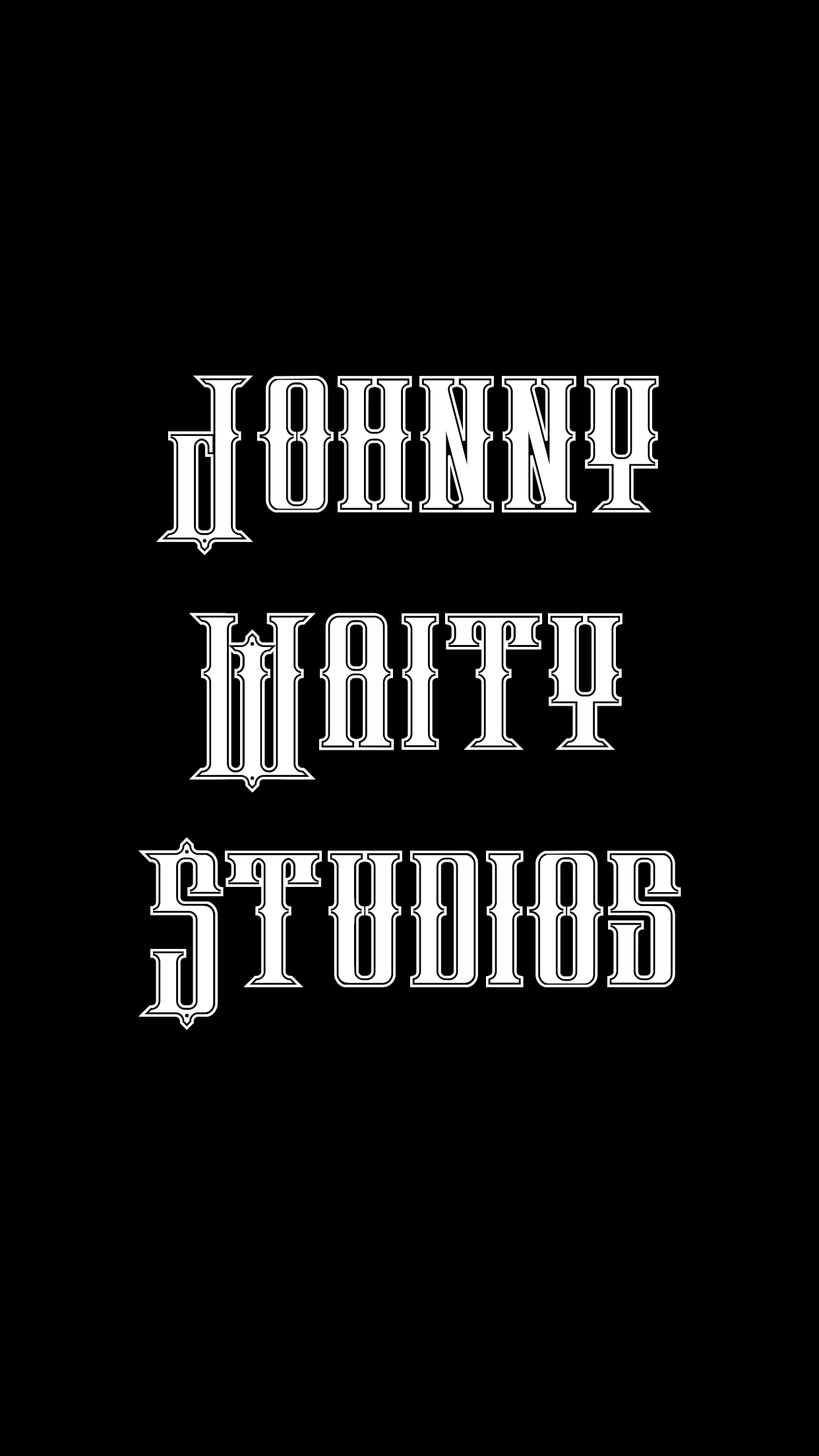
<style>
.page{position:relative;width:819px;height:1456px;background:#000000}
.page>*{position:absolute;margin:0}
.t1{font:197.8px "phoenixregular";color:#ffffff}
</style>
<div class="page">
<p class="t1" style="left:138px;top:375px;width:543px;height:655px;text-align:center">Johnny<br>Waity<br>Studios</p>
</div>
